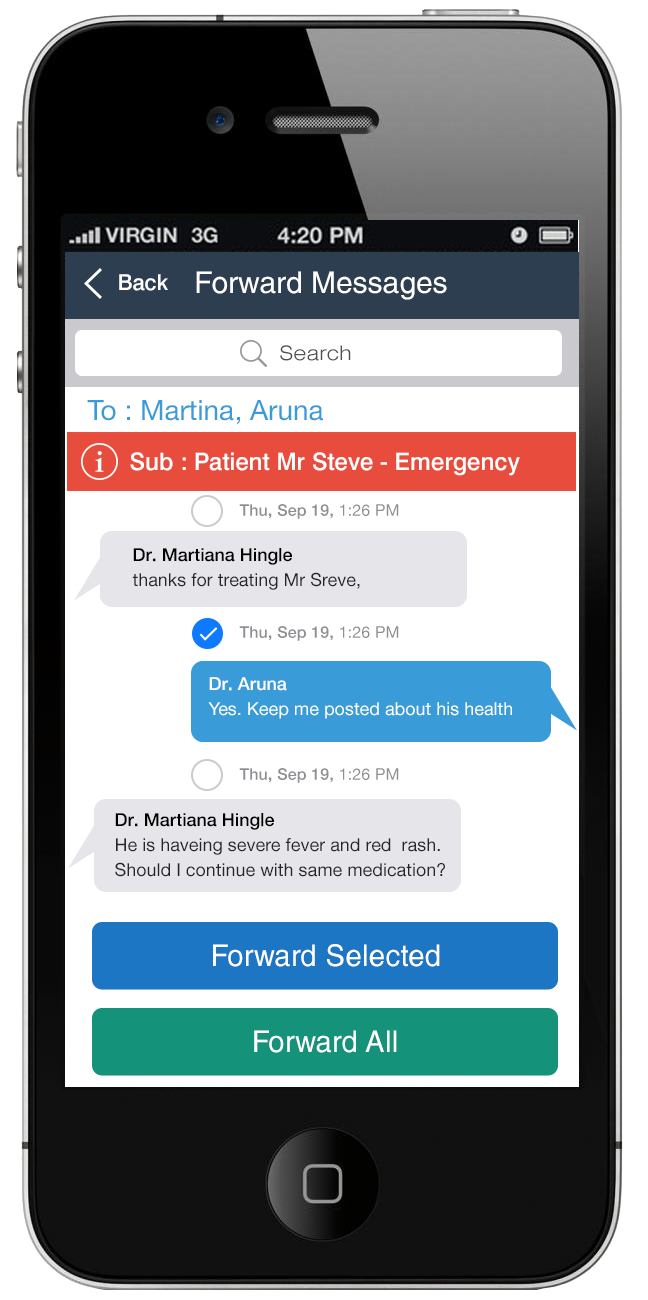
<style>
.page{position:relative;width:648px;height:1300px;background:#ffffff}
.page>*{position:absolute;margin:0}
.t1{font:22px "Swiss721BT-Medium";color:#ffffff}
.t2{font:30px "HelveticaLT";color:#ffffff}
.t3{font:20px "Swiss721BT-LightExtended";color:#505050}
.t4{font:28px "HelveticaNeue";color:#399cd9}
.t5{font:24px "Swiss721BT-Medium";color:#ffffff}
.t6{font:16px "HelveticaNeueMedium";letter-spacing:0.01em;color:#8e8e93}
.t7{font:16px "HelveticaNeue";letter-spacing:0.01em;color:#8e8e93}
.t8{font:18px/25px "HelveticaNeue";color:#262626}
.t9{font:18px/25px "HelveticaNeueMedium";color:#000000}
.t10{font:18px/25px "HelveticaNeue";color:#ffffff}
.t11{font:18px/25px "HelveticaNeueMedium";color:#ffffff}
.t12{font:30px "HelveticaCyr-Upright";color:#ffffff}
</style>
<div class="page">
<p class="t1" style="left:119px;top:274px;width:49px;height:17px">Back</p>
<p class="t2" style="left:196px;top:271px;width:251px;height:29px">Forward Messages</p>
<p class="t3" style="left:280px;top:345px;width:71px;height:16px">Search</p>
<p class="t4" style="left:87px;top:400px;width:236px;height:24px">To : Martina, Aruna</p>
<p class="t5" style="left:130px;top:452px;width:390px;height:24px">Sub : Patient Mr Steve - Emergency</p>
<p class="t6" style="left:239px;top:504px;width:160px;height:15px">Thu, Sep 19, <span class="t7">1:26 PM</span></p>
<p class="t8" style="left:132px;top:548px;width:228px;height:42px"><span class="t9">Dr. Martiana Hingle<br></span>thanks for treating Mr Sreve,</p>
<p class="t6" style="left:239px;top:626px;width:160px;height:15px">Thu, Sep 19, <span class="t7">1:26 PM</span></p>
<p class="t10" style="left:208px;top:677px;width:304px;height:42px"><span class="t11">Dr. Aruna<br></span>Yes. Keep me posted about his health</p>
<p class="t6" style="left:239px;top:768px;width:160px;height:15px">Thu, Sep 19, <span class="t7">1:26 PM</span></p>
<p class="t8" style="left:115px;top:813px;width:330px;height:64px"><span class="t9">Dr. Martiana Hingle<br></span>He is haveing severe fever and red  rash.<br>Should I continue with same medication?</p>
<p class="t12" style="left:213px;top:944px;width:227px;height:23px">Forward Selected</p>
<p class="t12" style="left:254px;top:1030px;width:143px;height:23px">Forward All</p>
</div>
